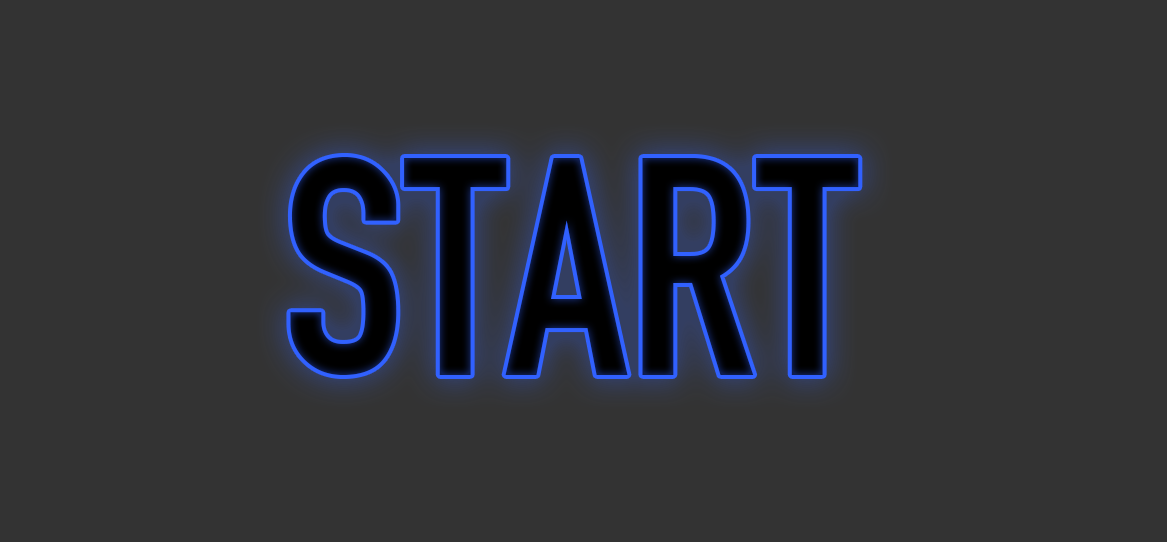
<style>
.page{position:relative;width:1167px;height:542px;background:#333333}
.page>*{position:absolute;margin:0}
.t1{font:302.5px "DINEngschrift";color:#010204}
</style>
<div class="page">
<p class="t1" style="left:290px;top:157px;width:569px;height:218px">START</p>
</div>
